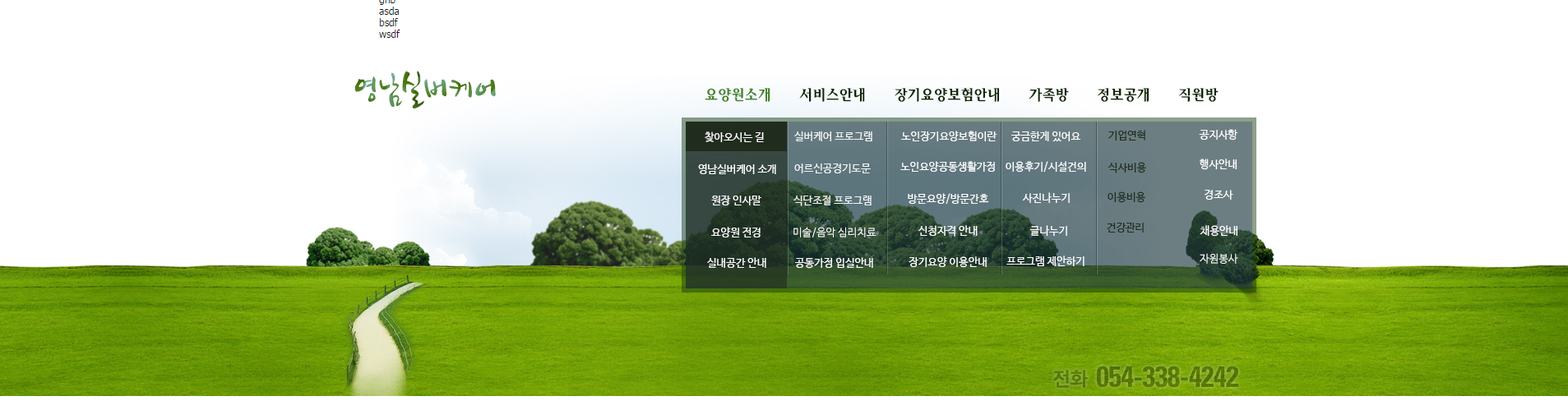
<style>
.page{position:relative;width:1568px;height:410px;background:#ffffff}
.page>*{position:absolute;margin:0}
.t1{font:39.5px "DXSeNB-KSCpc-EUC-H"}
.t2{font:14.8px "HaanSollipM";color:#0d2702}
.t3{font:14.8px "HaanSollipM";color:#45832b}
.t4{font:10.7px "NanumBarunGothic";color:#ffffff}
.t5{font:10.7px "NanumBarunGothic";color:#202c1e}
.t6{font:29.6px "Univers-CondensedBold";letter-spacing:-0.025em;color:#567803}
.t7{font:19.7px "NotoSansKR-Bold";letter-spacing:-0.025em;color:#587b03}
</style>
<div class="page">
<p class="t1" style="left:354px;top:71px;width:142px;height:38px">영남실버케어</p>
<p class="t2" style="left:705px;top:88px;width:514px;height:14px"><span class="t3">요양원소개</span>     서비스안내     장기요양보험안내     가족방     정보공개     직원방</p>
<p class="t4" style="left:705px;top:132px;width:59px;height:10px">찾아오시는 길</p>
<p class="t4" style="left:794px;top:132px;width:78px;height:9px;opacity:0.9">실버케어 프로그램</p>
<p class="t4" style="left:901px;top:131px;width:96px;height:10px">노인장기요양보험이란</p>
<p class="t4" style="left:1011px;top:131px;width:69px;height:10px">궁금한게 있어요</p>
<p class="t5" style="left:1108px;top:130px;width:37px;height:11px">기업연혁</p>
<p class="t4" style="left:1199px;top:129px;width:38px;height:12px">공지사항</p>
<p class="t4" style="left:900px;top:161px;width:95px;height:12px">노인요양공동생활가정</p>
<p class="t4" style="left:1006px;top:161px;width:80px;height:12px">이용후기/시설건의</p>
<p class="t5" style="left:1108px;top:162px;width:38px;height:11px">식사비용</p>
<p class="t4" style="left:1200px;top:159px;width:37px;height:11px">행사안내</p>
<p class="t4" style="left:698px;top:164px;width:78px;height:10px">영남실버케어 소개</p>
<p class="t4" style="left:794px;top:164px;width:77px;height:9px;opacity:0.9">어르신공경기도문</p>
<p class="t4" style="left:711px;top:196px;width:50px;height:10px">원장 인사말</p>
<p class="t4" style="left:793px;top:195px;width:79px;height:11px;opacity:0.9">식단조절 프로그램</p>
<p class="t4" style="left:908px;top:193px;width:81px;height:12px">방문요양/방문간호</p>
<p class="t4" style="left:1022px;top:192px;width:48px;height:11px">사진나누기</p>
<p class="t5" style="left:1108px;top:192px;width:37px;height:11px">이용비용</p>
<p class="t4" style="left:1205px;top:190px;width:28px;height:10px">경조사</p>
<p class="t4" style="left:711px;top:227px;width:50px;height:11px">요양원 전경</p>
<p class="t4" style="left:793px;top:227px;width:84px;height:11px">미술/음악 심리치료</p>
<p class="t4" style="left:918px;top:225px;width:60px;height:12px">신청자격 안내</p>
<p class="t4" style="left:1029px;top:225px;width:38px;height:11px">글나누기</p>
<p class="t5" style="left:1107px;top:223px;width:37px;height:10px">건강관리</p>
<p class="t4" style="left:1200px;top:225px;width:37px;height:12px">채용안내</p>
<p class="t4" style="left:707px;top:257px;width:59px;height:11px">실내공간 안내</p>
<p class="t4" style="left:795px;top:257px;width:78px;height:12px">공동가정 입실안내</p>
<p class="t4" style="left:909px;top:257px;width:78px;height:11px">장기요양 이용안내</p>
<p class="t4" style="left:1006px;top:256px;width:79px;height:10px">프로그램 제안하기</p>
<p class="t4" style="left:1200px;top:253px;width:38px;height:11px">자원봉사</p>
<p class="t6" style="left:1096px;top:366px;width:143px;height:22px">054-338-4242</p>
<p class="t7" style="left:1052px;top:370px;width:36px;height:18px">전화</p>
</div>
